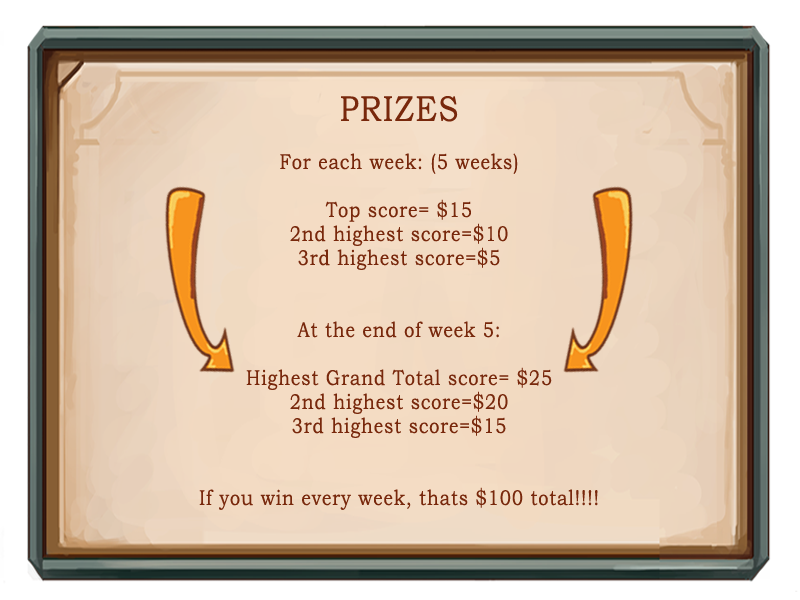
<style>
.page{position:relative;width:800px;height:600px}
.page>*{position:absolute;margin:0}
.t1{font:21.6px/24px "BookmanOldStyle";letter-spacing:0.05em;color:#78280c;scale:0.83 1}
.t2{font:36px/24px "BookmanOldStyle";letter-spacing:0.05em;color:#78280c;scale:0.83 1}
</style>
<div class="page">
<p class="t1" style="left:199px;top:96px;width:399px;height:414px;text-align:center"><span class="t2">PRIZES<br><br></span>For each week: (5 weeks)<br><br>Top score= $15<br>2nd highest score=$10<br>3rd highest score=$5<br><br><br>At the end of week 5:<br><br>Highest Grand Total score= $25<br>2nd highest score=$20<br>3rd highest score=$15<br><br><br>If you win every week, thats $100 total!!!!</p>
</div>
